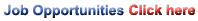
<style>
.page{position:relative;width:198px;height:21px;background:#ffffff}
.page>*{position:absolute;margin:0}
.t1{font:14px "Arial-BoldMT"}
</style>
<div class="page">
<p class="t1" style="left:3px;top:4px;width:121px;height:14px">Job Opportunities</p>
<p class="t1" style="left:129px;top:4px;width:66px;height:11px">Click here</p>
<p class="t1" style="left:129px;top:4px;width:66px;height:11px">Click here</p>
</div>
